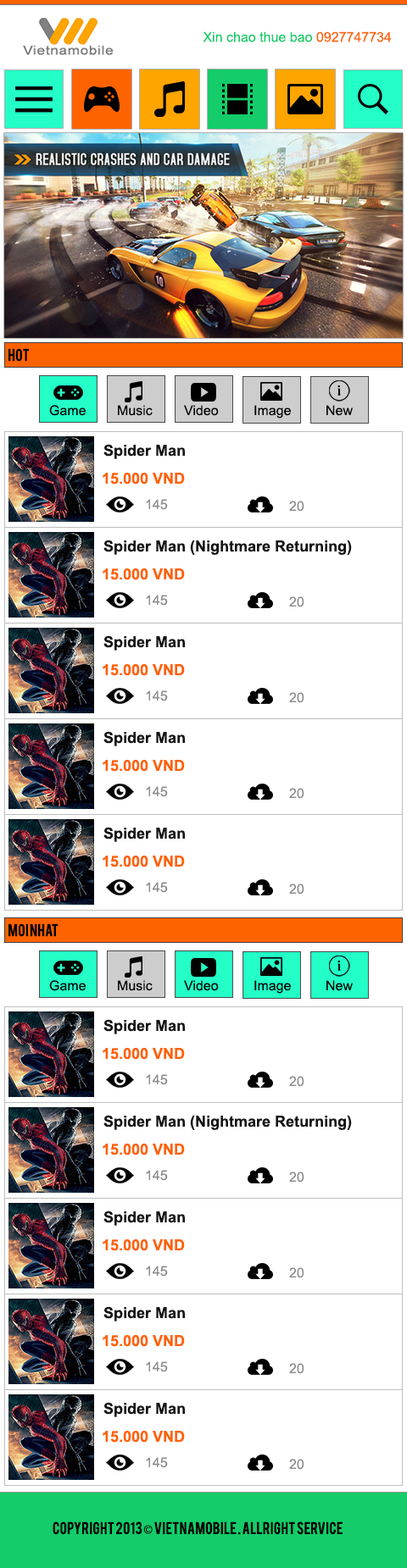
<style>
.page{position:relative;width:407px;height:1568px;background:#ffffff}
.page>*{position:absolute;margin:0}
.t1{font:13.6px "ArialMT";color:#14cc69}
.t2{font:13.6px "ArialMT";color:#ff6200}
.t3{font:13.6px "Bebas";color:#000000}
.t4{font:13.6px "ArialMT";color:#000000}
.t5{font:15.2px "Arial-BoldMT";color:#151515}
.t6{font:15.2px "Arial-BoldMT";color:#ff6200}
.t7{font:13.6px "ArialMT";color:#8d8d8d}
.t8{font:13.6px "MyriadPro-Regular";color:#000000}
</style>
<div class="page">
<p class="t1" style="left:202px;top:31px;width:189px;height:11px">Xin chao thue bao <span class="t2">0927747734</span></p>
<p class="t3" style="left:8px;top:348px;width:21px;height:14px">hot</p>
<p class="t4" style="left:49px;top:405px;width:37px;height:11px">Game</p>
<p class="t4" style="left:118px;top:405px;width:34px;height:11px">Music</p>
<p class="t4" style="left:184px;top:405px;width:35px;height:11px">Video</p>
<p class="t4" style="left:254px;top:405px;width:37px;height:13px">Image</p>
<p class="t4" style="left:326px;top:405px;width:26px;height:11px">New</p>
<p class="t5" style="left:103px;top:444px;width:82px;height:15px">Spider Man</p>
<p class="t6" style="left:103px;top:473px;width:82px;height:12px">15.000 VND</p>
<p class="t7" style="left:146px;top:499px;width:22px;height:11px">145</p>
<p class="t7" style="left:289px;top:501px;width:15px;height:11px">20</p>
<p class="t5" style="left:103px;top:540px;width:249px;height:15px">Spider Man (Nightmare Returning)</p>
<p class="t6" style="left:103px;top:568px;width:82px;height:12px">15.000 VND</p>
<p class="t7" style="left:146px;top:595px;width:22px;height:11px">145</p>
<p class="t7" style="left:289px;top:596px;width:15px;height:11px">20</p>
<p class="t5" style="left:103px;top:635px;width:82px;height:16px">Spider Man</p>
<p class="t6" style="left:103px;top:664px;width:82px;height:12px">15.000 VND</p>
<p class="t7" style="left:146px;top:690px;width:22px;height:11px">145</p>
<p class="t7" style="left:289px;top:692px;width:15px;height:11px">20</p>
<p class="t5" style="left:103px;top:731px;width:82px;height:15px">Spider Man</p>
<p class="t6" style="left:103px;top:760px;width:82px;height:12px">15.000 VND</p>
<p class="t7" style="left:146px;top:786px;width:22px;height:11px">145</p>
<p class="t7" style="left:289px;top:788px;width:15px;height:11px">20</p>
<p class="t5" style="left:103px;top:827px;width:82px;height:15px">Spider Man</p>
<p class="t6" style="left:103px;top:856px;width:82px;height:11px">15.000 VND</p>
<p class="t7" style="left:146px;top:882px;width:22px;height:11px">145</p>
<p class="t7" style="left:289px;top:884px;width:15px;height:11px">20</p>
<p class="t3" style="left:8px;top:923px;width:50px;height:14px">Moi NHat</p>
<p class="t4" style="left:49px;top:980px;width:37px;height:11px">Game</p>
<p class="t4" style="left:118px;top:980px;width:34px;height:11px">Music</p>
<p class="t4" style="left:184px;top:980px;width:35px;height:11px">Video</p>
<p class="t4" style="left:254px;top:980px;width:37px;height:14px">Image</p>
<p class="t4" style="left:326px;top:980px;width:26px;height:11px">New</p>
<p class="t5" style="left:103px;top:1019px;width:82px;height:15px">Spider Man</p>
<p class="t6" style="left:103px;top:1048px;width:82px;height:12px">15.000 VND</p>
<p class="t7" style="left:146px;top:1074px;width:22px;height:11px">145</p>
<p class="t7" style="left:289px;top:1076px;width:15px;height:11px">20</p>
<p class="t5" style="left:103px;top:1115px;width:249px;height:15px">Spider Man (Nightmare Returning)</p>
<p class="t6" style="left:103px;top:1144px;width:82px;height:11px">15.000 VND</p>
<p class="t7" style="left:146px;top:1170px;width:22px;height:11px">145</p>
<p class="t7" style="left:289px;top:1172px;width:15px;height:11px">20</p>
<p class="t5" style="left:103px;top:1211px;width:82px;height:15px">Spider Man</p>
<p class="t6" style="left:103px;top:1239px;width:82px;height:12px">15.000 VND</p>
<p class="t7" style="left:146px;top:1266px;width:22px;height:11px">145</p>
<p class="t7" style="left:289px;top:1267px;width:15px;height:11px">20</p>
<p class="t5" style="left:103px;top:1306px;width:82px;height:15px">Spider Man</p>
<p class="t6" style="left:103px;top:1335px;width:82px;height:12px">15.000 VND</p>
<p class="t7" style="left:146px;top:1361px;width:22px;height:11px">145</p>
<p class="t7" style="left:289px;top:1363px;width:15px;height:11px">20</p>
<p class="t5" style="left:103px;top:1402px;width:82px;height:15px">Spider Man</p>
<p class="t6" style="left:103px;top:1431px;width:82px;height:12px">15.000 VND</p>
<p class="t7" style="left:146px;top:1457px;width:22px;height:11px">145</p>
<p class="t7" style="left:289px;top:1459px;width:15px;height:11px">20</p>
<p class="t3" style="left:53px;top:1521px;width:289px;height:14px">Copyright 2013 <span class="t8">©</span> Vietnamobile . Allright service</p>
</div>
